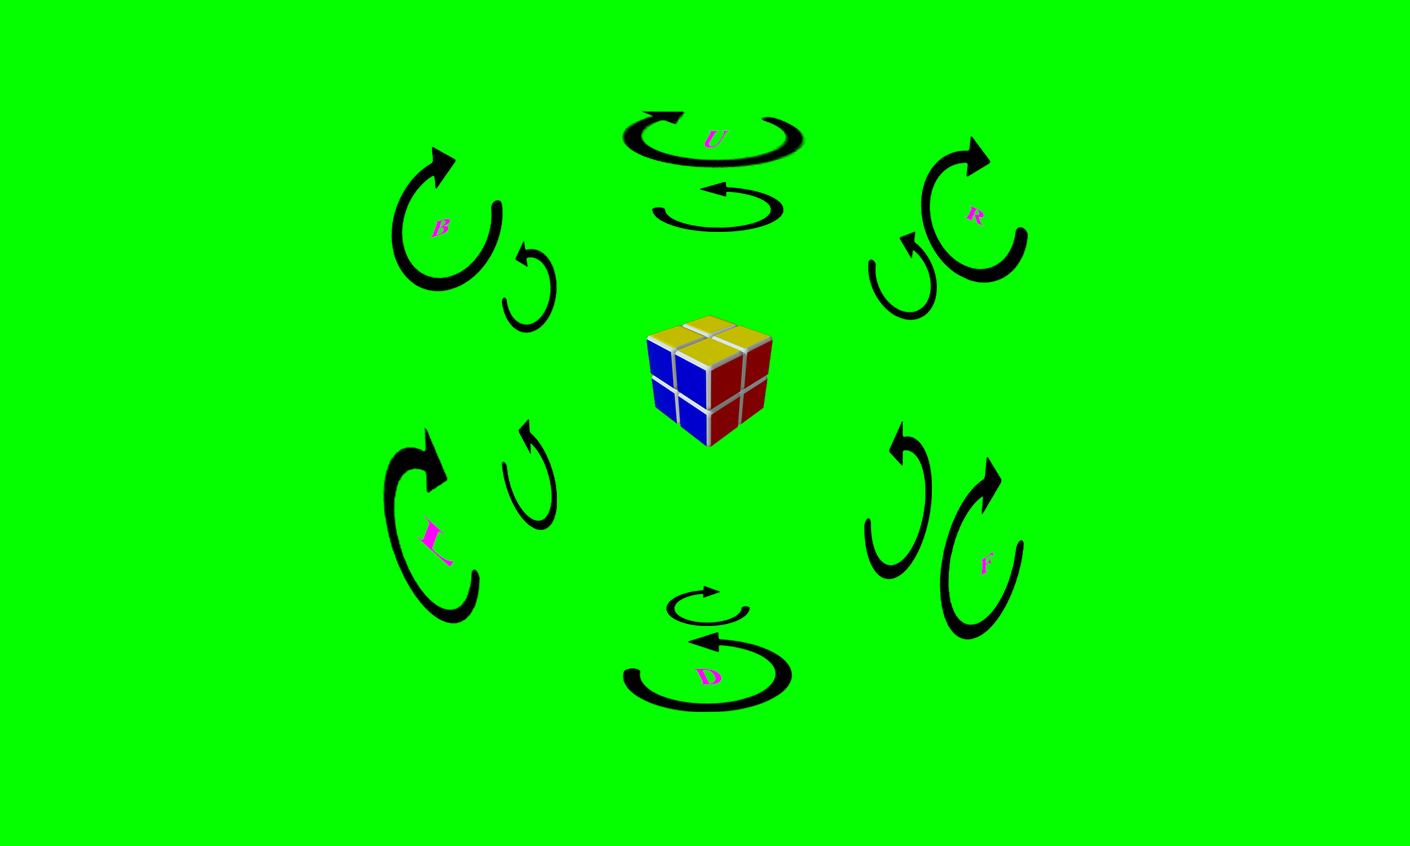
<style>
.page{position:relative;width:1410px;height:846px;background:#06ff00}
.page>*{position:absolute;margin:0}
.t1{font:25.3px "TimesNewRomanPS-BoldItalicMT";color:#ff00ff;scale:1.18 1}
.t2{font:21.1px "TimesNewRomanPS-BoldItalicMT";color:#ff00ff;scale:1.49 1}
.t3{font:21.1px "TimesNewRomanPS-BoldItalicMT";color:#ff00ff;scale:1.54 1}
.t4{font:47.5px "TimesNewRomanPS-BoldItalicMT";color:#ff00ff;scale:1.74 1}
.t5{font:19.3px "TimesNewRomanPS-BoldItalicMT";color:#ff00ff;scale:1.5 1}
.t6{font:23.1px "TimesNewRomanPS-BoldItalicMT";color:#ff00ff;scale:1.63 1}
</style>
<div class="page">
<p class="t1" style="left:704px;top:130px;width:26px;height:18px">U</p>
<p class="t2" style="left:964px;top:205px;width:20px;height:21px;rotate:26deg">R</p>
<p class="t3" style="left:429px;top:219px;width:21px;height:19px;rotate:-16deg">B</p>
<p class="t4" style="left:417px;top:516px;width:36px;height:51px;rotate:42deg">L</p>
<p class="t5" style="left:980px;top:551px;width:13px;height:26px;rotate:-36deg">F</p>
<p class="t6" style="left:693px;top:669px;width:29px;height:15px">D</p>
</div>
